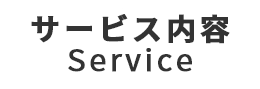
<style>
.page{position:relative;width:260px;height:89px;background:#ffffff}
.page>*{position:absolute;margin:0}
.t1{font:30px "SourceHanSansJP-Bold";letter-spacing:0.1em;color:#333333;font-weight:bold}
.t2{font:30px "SourceHanSansJP-Regular";letter-spacing:0.1em;color:#333333;font-weight:bold}
</style>
<div class="page">
<p class="t1" style="left:31px;top:14px;width:199px;height:30px">サービス内容</p>
<p class="t2" style="left:68px;top:48px;width:124px;height:24px">Service</p>
</div>
